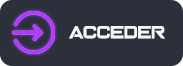
<style>
.page{position:relative;width:183px;height:66px;background:#2b303b}
.page>*{position:absolute;margin:0}
.t1{font:18px "ReturnoftheGrid";color:#f7f7f7}
</style>
<div class="page">
<p class="t1" style="left:69px;top:26px;width:96px;height:13px">ACCEDER</p>
</div>
